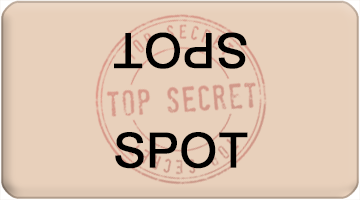
<style>
.page{position:relative;width:360px;height:200px;background:#e8d0bb}
.page>*{position:absolute;margin:0}
.t1{font:48px "ArialMT";color:#000000;font-weight:bold}
</style>
<div class="page">
<p class="t1" style="left:114px;top:32px;width:133px;height:37px;rotate:180deg">SPOT</p>
<p class="t1" style="left:115px;top:132px;width:133px;height:37px">SPOT</p>
</div>
